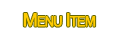
<style>
.page{position:relative;width:118px;height:39px;background:#ffffff}
.page>*{position:absolute;margin:0}
.t1{font:18px "ArialMT";letter-spacing:-0.075em;color:#ffcb00;font-variant:small-caps;font-weight:bold}
</style>
<div class="page">
<p class="t1" style="left:23px;top:13px;width:73px;height:14px">Menu Item</p>
</div>
